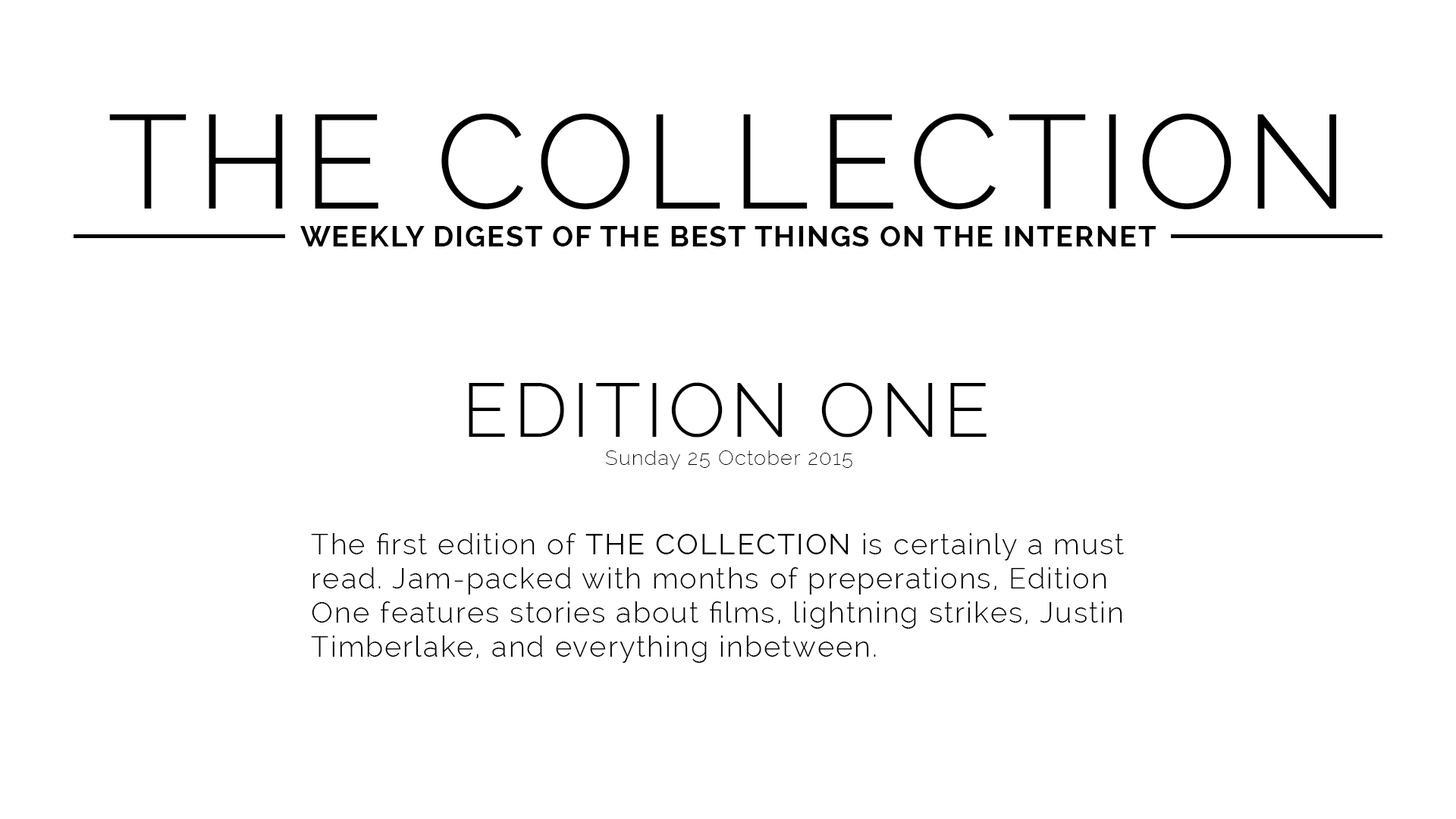
<style>
.page{position:relative;width:1456px;height:819px;background:#ffffff}
.page>*{position:absolute;margin:0}
.t1{font:132.8px "Raleway-Light";letter-spacing:0.06em;color:#000000;text-transform:uppercase}
.t2{font:28.5px "Raleway-Bold";letter-spacing:0.06em;color:#000000;text-transform:uppercase}
.t3{font:75.5px "Raleway-Light";letter-spacing:0.06em;color:#000000;text-transform:uppercase}
.t4{font:20.2px "Raleway-ExtraLight";letter-spacing:0.06em;color:#000000}
.t5{font:28.5px "Raleway-Light";letter-spacing:0.06em;color:#000000}
.t6{font:28.5px "Raleway";letter-spacing:0.06em;color:#000000}
</style>
<div class="page">
<p class="t1" style="left:109px;top:113px;width:1228px;height:96px">The Collection</p>
<p class="t2" style="left:300px;top:226px;width:856px;height:20px">Weekly digest of the best things on the internet</p>
<p class="t3" style="left:469px;top:382px;width:518px;height:56px">Edition ONE</p>
<p class="t4" style="left:606px;top:450px;width:246px;height:19px">Sunday 25 October 2015</p>
<p class="t5" style="left:311px;top:533px;width:813px;height:130px">The first edition of <span class="t6">THE COLLECTION</span> is certainly a must read. Jam-packed with months of preperations, Edition One features stories about films, lightning strikes, Justin Timberlake, and everything inbetween.</p>
</div>
